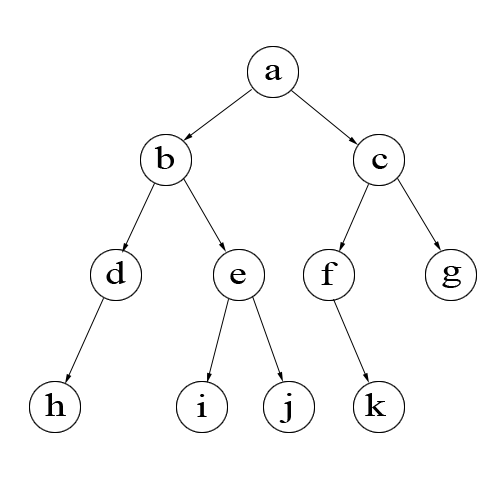
<style>
.page{position:relative;width:500px;height:500px;background:#ffffff}
.page>*{position:absolute;margin:0}
.t1{font:32.5px "TimesNewRomanPSMT";color:#000000;scale:1.25 1}
.t2{font:32.5px "TimesNewRomanPSMT";color:#000000;scale:1.22 1}
.t3{font:32.5px "TimesNewRomanPSMT";color:#000000;scale:1.27 1}
.t4{font:32.5px "TimesNewRomanPSMT";color:#000000;scale:1.29 1}
.t5{font:32.5px "TimesNewRomanPSMT";color:#000000;scale:1.33 1}
.t6{font:32.5px "TimesNewRomanPSMT";color:#000000;scale:1.3 1}
</style>
<div class="page">
<p class="t1" style="left:265px;top:65px;width:18px;height:15px">a</p>
<p class="t1" style="left:154px;top:146px;width:20px;height:23px">b</p>
<p class="t2" style="left:372px;top:154px;width:16px;height:15px">c</p>
<p class="t1" style="left:106px;top:261px;width:20px;height:23px">d</p>
<p class="t2" style="left:230px;top:269px;width:16px;height:15px">e</p>
<p class="t3" style="left:321px;top:262px;width:17px;height:23px">f</p>
<p class="t4" style="left:442px;top:266px;width:20px;height:22px">g</p>
<p class="t4" style="left:45px;top:393px;width:21px;height:23px">h</p>
<p class="t4" style="left:197px;top:394px;width:10px;height:23px">i</p>
<p class="t5" style="left:279px;top:393px;width:13px;height:30px">j</p>
<p class="t6" style="left:365px;top:393px;width:21px;height:23px">k</p>
</div>
